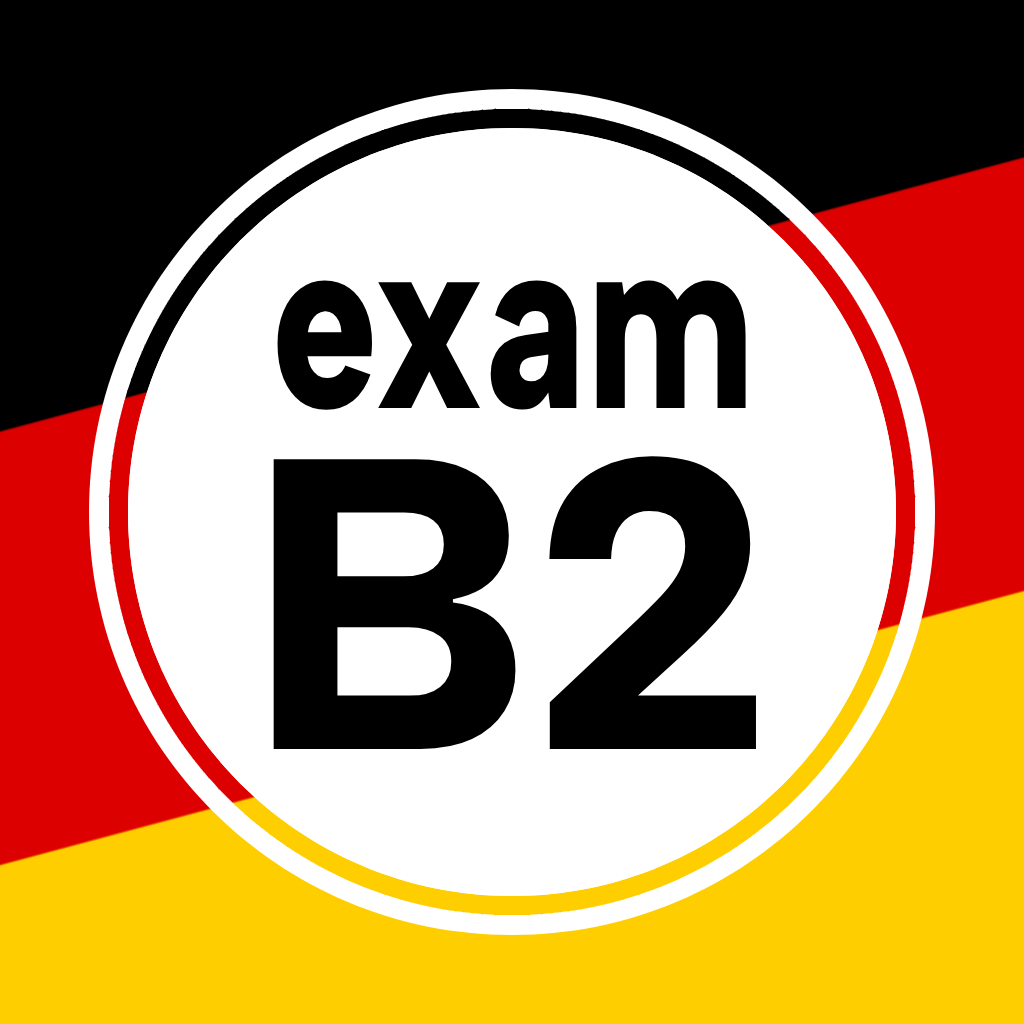
<style>
.page{position:relative;width:1024px;height:1024px;background:#ffffff}
.page>*{position:absolute;margin:0}
.t1{font:251.5px "AlbertSans-ExtraBold";color:#000000;scale:0.76 1}
.t2{font:414px "AlbertSans-ExtraBold";color:#000000}
</style>
<div class="page">
<p class="t1" style="left:277px;top:280px;width:469px;height:130px">exam</p>
<p class="t2" style="left:273px;top:456px;width:483px;height:293px">B2</p>
</div>
